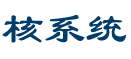
<style>
.page{position:relative;width:131px;height:59px;background:#ffffff}
.page>*{position:absolute;margin:0}
.t1{font:42px "LiSu";color:#023c69}
</style>
<div class="page">
<p class="t1" style="left:2px;top:15px;width:125px;height:28px">核系统</p>
</div>
